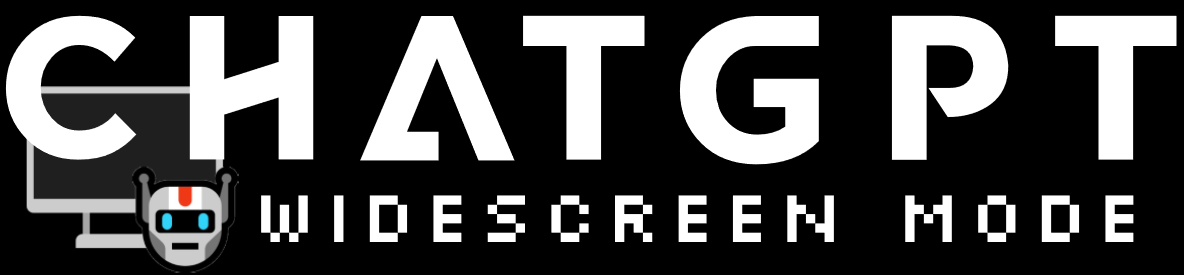
<style>
.page{position:relative;width:1184px;height:275px;background:#000000}
.page>*{position:absolute;margin:0}
.t1{font:203.7px "BabaPro-Bold";letter-spacing:-0.02em;color:#ffffff}
.t2{font:78.2px "Silkscreen-Expanded";letter-spacing:-0.02em;color:#ffffff}
</style>
<div class="page">
<p class="t1" style="left:5px;top:15px;width:1172px;height:150px">CHATGPT</p>
<p class="t2" style="left:261px;top:195px;width:873px;height:47px">Widescreen mode</p>
</div>
